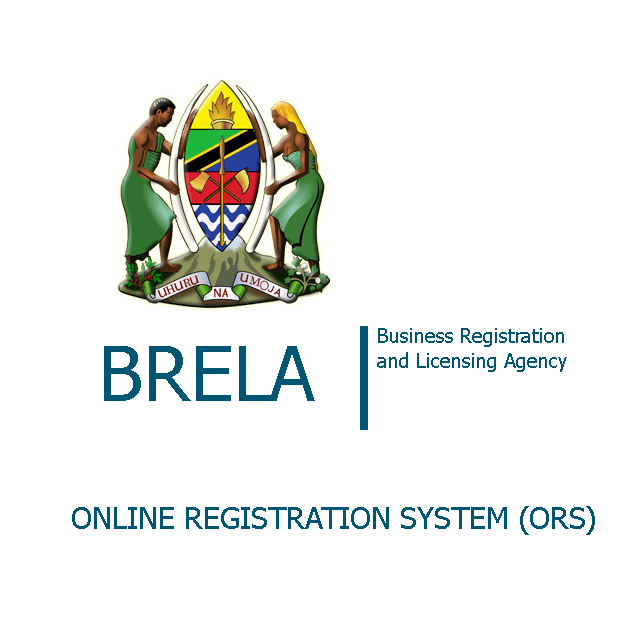
<style>
.page{position:relative;width:623px;height:638px;background:#ffffff}
.page>*{position:absolute;margin:0}
.t1{font:20.3px "Tahoma";color:#005573}
.t2{font:76.2px "Tahoma";color:#005573}
.t3{font:30.5px "Tahoma";color:#005573}
</style>
<div class="page">
<p class="t1" style="left:377px;top:328px;width:190px;height:44px">Business Registration and Licensing Agency</p>
<p class="t2" style="left:104px;top:346px;width:211px;height:55px">BRELA</p>
<p class="t3" style="left:72px;top:506px;width:523px;height:29px">ONLINE REGISTRATION SYSTEM (ORS)</p>
</div>
